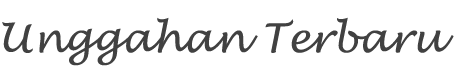
<style>
.page{position:relative;width:454px;height:81px;background:#ffffff}
.page>*{position:absolute;margin:0}
.t1{font:40px "LucidaHandwriting-Italic";color:#414141}
</style>
<div class="page">
<p class="t1" style="left:2px;top:17px;width:452px;height:49px">Unggahan Terbaru</p>
</div>
